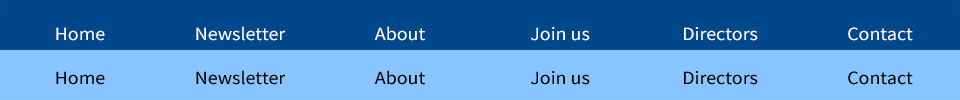
<style>
.page{position:relative;width:960px;height:100px;background:#88c4ff}
.page>*{position:absolute;margin:0}
.t1{font:18.7px "SourceSansPro-Regular";color:#ffffff;scale:1.07 1}
.t2{font:18.7px "SourceSansPro-Regular";color:#050000;scale:1.07 1}
</style>
<div class="page">
<p class="t1" style="left:56px;top:27px;width:49px;height:14px">Home</p>
<p class="t1" style="left:196px;top:26px;width:90px;height:15px">Newsletter</p>
<p class="t1" style="left:374px;top:26px;width:51px;height:15px">About</p>
<p class="t1" style="left:530px;top:27px;width:60px;height:14px">Join us</p>
<p class="t1" style="left:684px;top:27px;width:74px;height:14px">Directors</p>
<p class="t1" style="left:848px;top:27px;width:65px;height:14px">Contact</p>
<p class="t2" style="left:56px;top:71px;width:49px;height:14px">Home</p>
<p class="t2" style="left:196px;top:70px;width:90px;height:15px">Newsletter</p>
<p class="t2" style="left:374px;top:70px;width:51px;height:15px">About</p>
<p class="t2" style="left:530px;top:71px;width:60px;height:14px">Join us</p>
<p class="t2" style="left:684px;top:71px;width:74px;height:14px">Directors</p>
<p class="t2" style="left:848px;top:71px;width:65px;height:14px">Contact</p>
</div>
